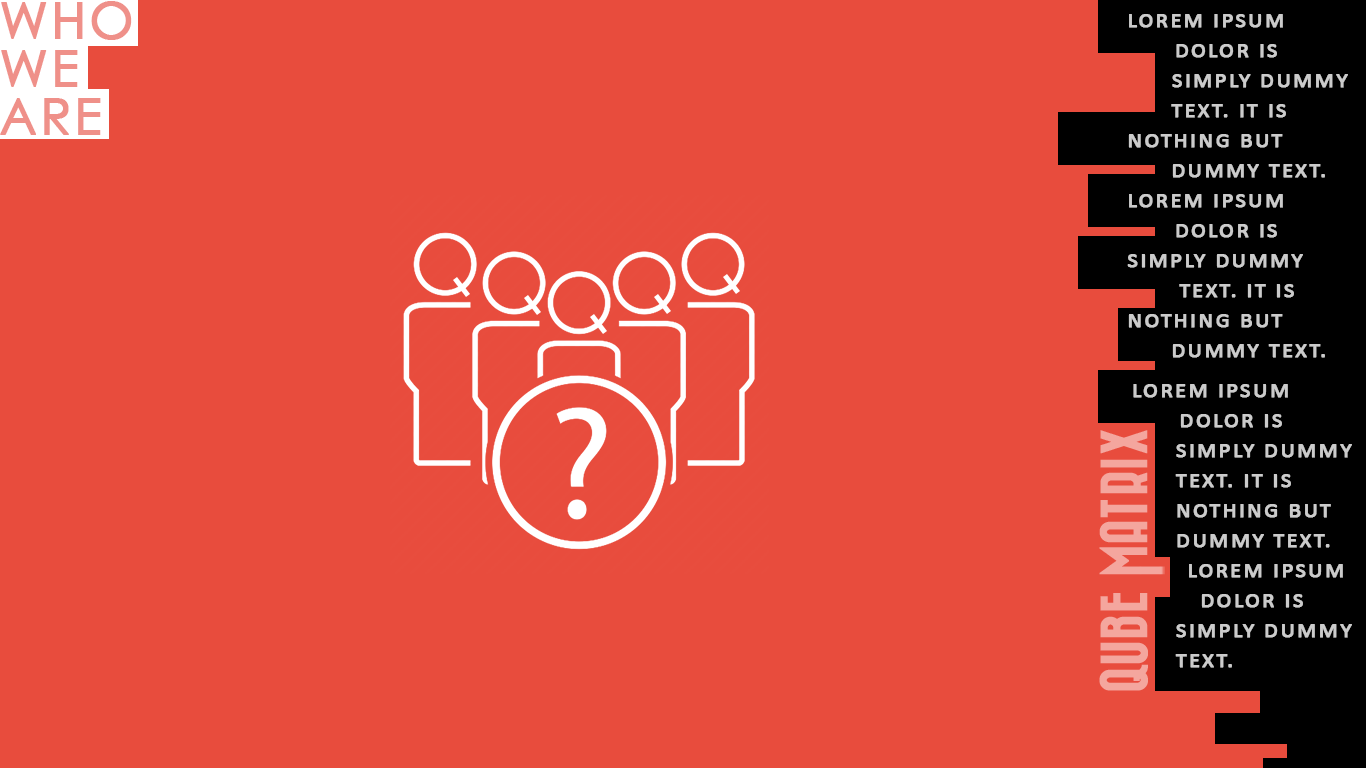
<style>
.page{position:relative;width:1366px;height:768px;background:#e84c3d}
.page>*{position:absolute;margin:0}
.t1{font:50px/48px "LevenimMT";letter-spacing:0.05em;color:#ef9089;font-variant:small-caps;font-weight:bold}
.t2{font:26px/30px "Calibri";letter-spacing:0.05em;color:#cbcbcb;font-variant:small-caps;font-weight:bold}
</style>
<div class="page">
<p class="t1" style="left:0px;top:1px;width:132px;height:134px">WHO <br>WE <br>ARE</p>
<p class="t2" style="left:1127px;top:14px;width:221px;height:344px">lorem ipsum              dolor is              simply dummy     text. it is nothing but       dummy text.<br>lorem ipsum              dolor is          simply dummy        text. it is nothing but       dummy text.</p>
<p class="t2" style="left:1133px;top:384px;width:219px;height:284px">lorem ipsum              dolor is            simply dummy     text. it is <br>  nothing but     dummy text.<br>       lorem ipsum    dolor is            simply dummy     text.</p>
</div>
